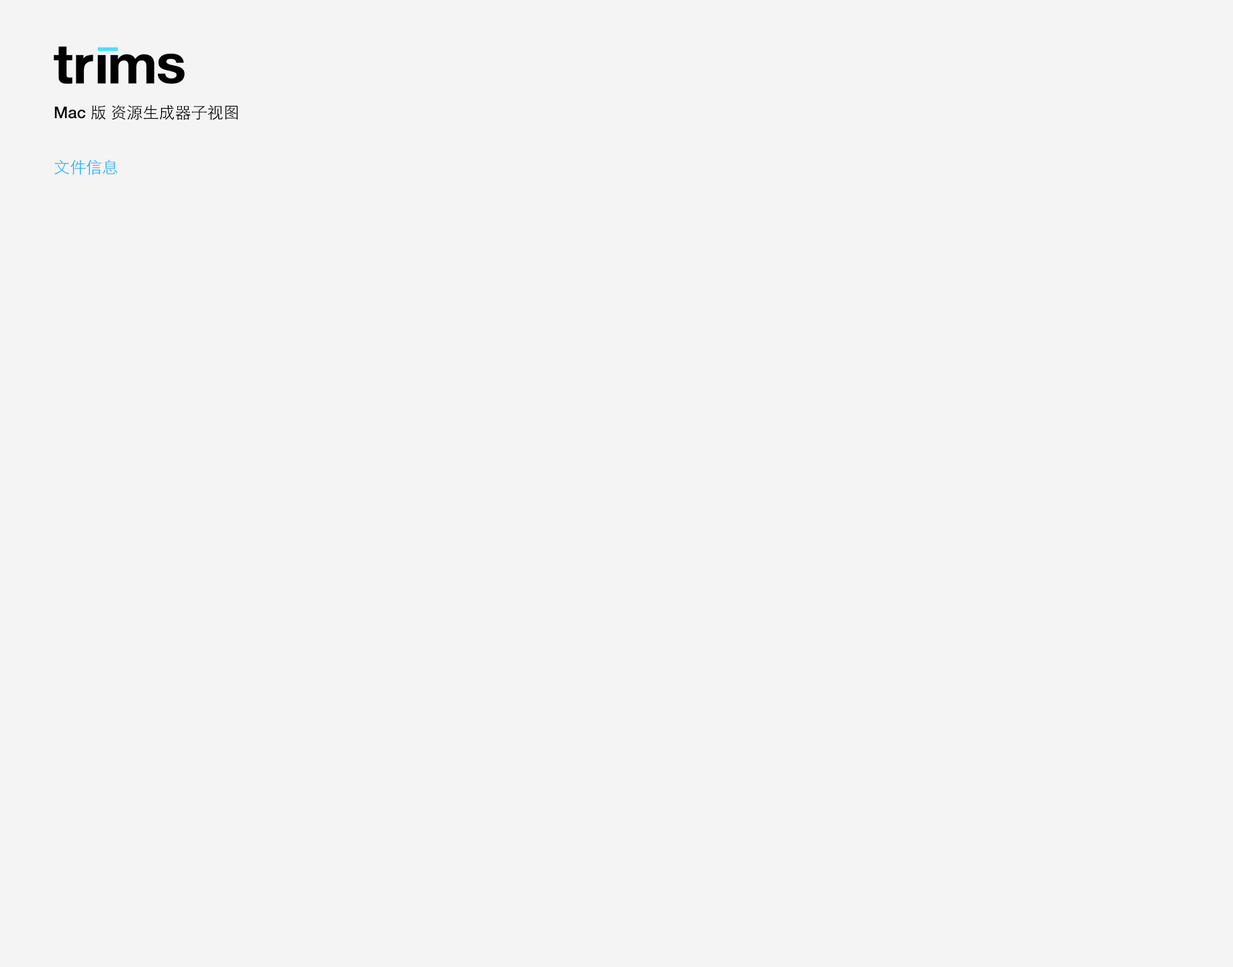
<style>
.page{position:relative;width:1233px;height:967px;background:#f4f4f4}
.page>*{position:absolute;margin:0}
.t1{font:16.1px/27.5px "STHeitiSC-Light";color:#000000}
.t2{font:16.1px/27.5px "HelveticaNeue-Medium";color:#000000}
.t3{font:16.1px/27.5px "STHeitiSC-Light";color:#27b3fc}
</style>
<div class="page">
<p class="t1" style="left:54px;top:105px;width:184px;height:70px"><span class="t2">Mac </span>版 资源生成器子视图<br><br><span class="t3">文件信息</span></p>
</div>
